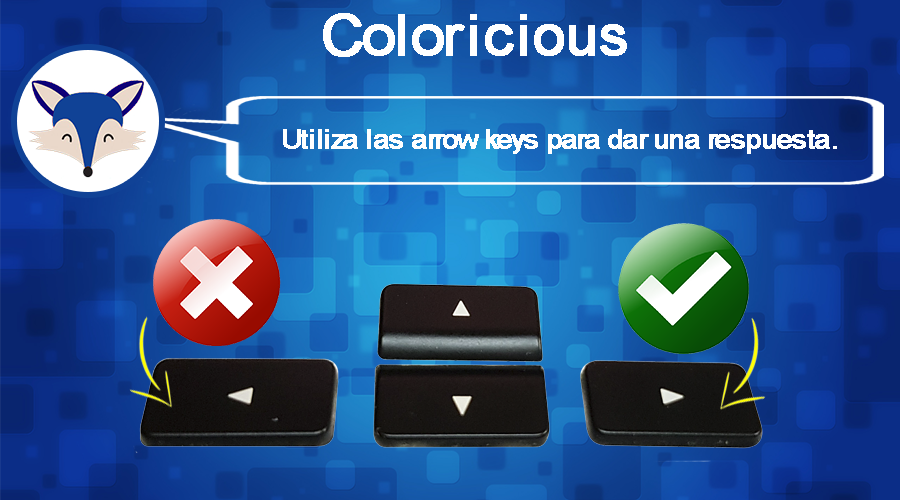
<style>
.page{position:relative;width:900px;height:500px}
.page>*{position:absolute;margin:0}
.t1{font:56.9px "ArialMT";color:#ffffff;font-weight:bold;scale:1.07 1}
.t2{font:56.9px "ArialMT";color:#ffffff;font-weight:bold}
.t3{font:26px "ArialMT";color:#ffffff;font-weight:bold;scale:1.1 1}
</style>
<div class="page">
<p class="t1" style="left:323px;top:13px;width:142px;height:44px">Color</p>
<p class="t2" style="left:470px;top:14px;width:157px;height:42px">icious</p>
<p class="t3" style="left:283px;top:129px;width:554px;height:25px">Utiliza las arrow keys para dar una respuesta.</p>
</div>
